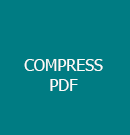
<style>
.page{position:relative;width:130px;height:135px;background:#007c83}
.page>*{position:absolute;margin:0}
.t1{font:12px "Tahoma";color:#fcfcfa}
</style>
<div class="page">
<p class="t1" style="left:24px;top:59px;width:79px;height:32px;text-align:center">COMPRESS<br>PDF</p>
</div>
